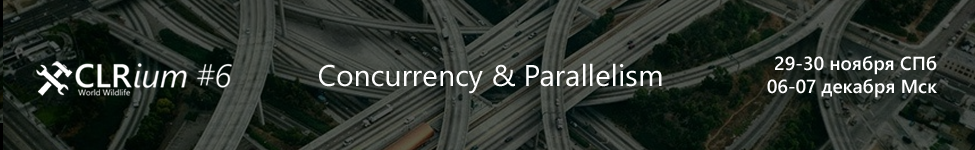
<style>
.page{position:relative;width:975px;height:150px}
.page>*{position:absolute;margin:0}
.t1{font:30px "SegoeUI";color:#fdfdfd}
.t2{font:19px "SegoeUI-SemiBold";color:#ffffff}
</style>
<div class="page">
<p class="t1" style="left:319px;top:63px;width:343px;height:31px">Concurrency &amp; Parallelism</p>
<p class="t2" style="left:767px;top:55px;width:170px;height:43px;text-align:right">29-30 ноября СПб<br>06-07 декабря Мск</p>
</div>
